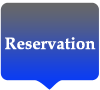
<style>
.page{position:relative;width:100px;height:90px}
.page>*{position:absolute;margin:0}
.t1{font:16.7px "BookAntiqua-Bold";color:#ffffff}
</style>
<div class="page">
<p class="t1" style="left:5px;top:37px;width:91px;height:13px">Reservation</p>
</div>
